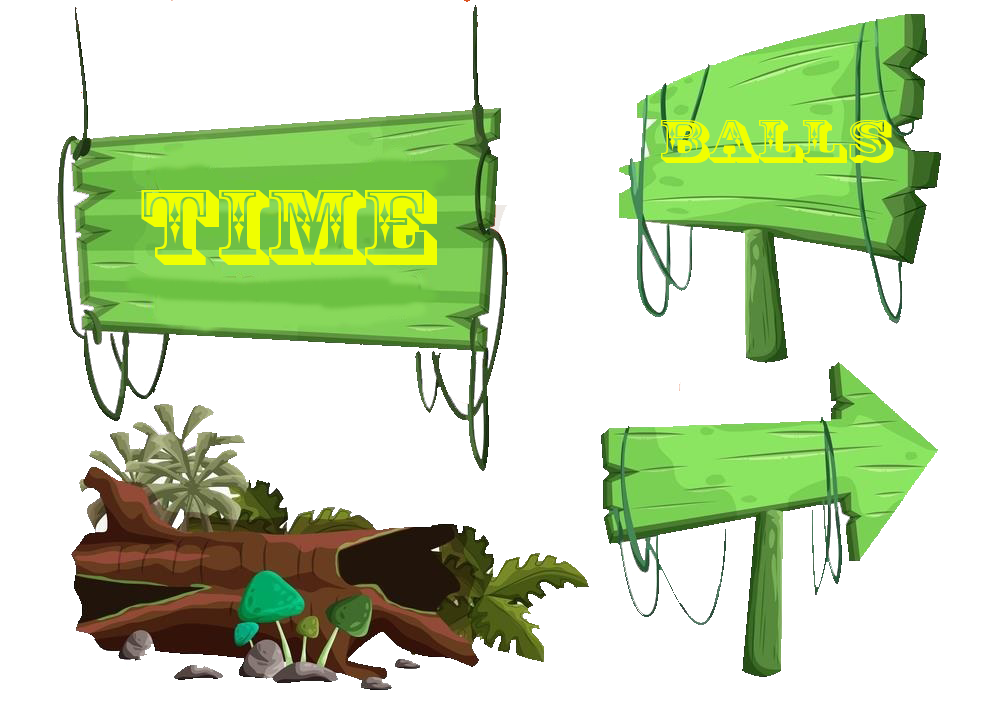
<style>
.page{position:relative;width:1000px;height:707px;background:#ffffff}
.page>*{position:absolute;margin:0}
.t1{font:57px "RosewoodStd-Regular";color:#f0ff00;scale:1.47 1}
.t2{font:100.9px "RosewoodStd-Regular";color:#f0ff00;scale:1.43 1}
</style>
<div class="page">
<p class="t1" style="left:661px;top:120px;width:233px;height:43px">Balls</p>
<p class="t2" style="left:141px;top:190px;width:296px;height:75px">Time</p>
</div>
